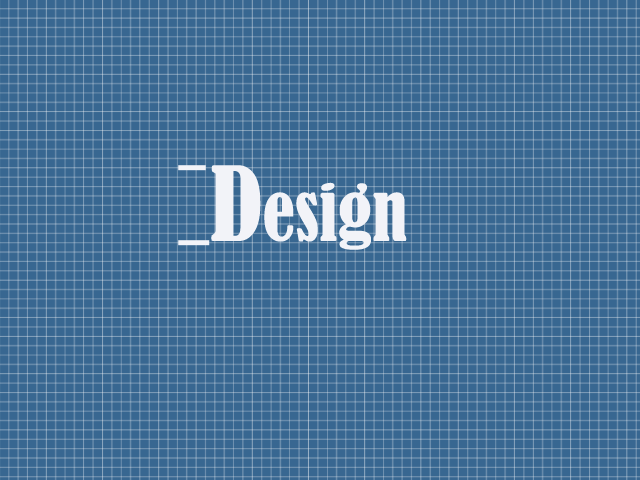
<style>
.page{position:relative;width:640px;height:480px;background:#386791}
.page>*{position:absolute;margin:0}
.t1{font:72px "BernardMT-Condensed";color:#f2f3f8}
.t2{font:96px "BernardMT-Condensed";color:#f2f3f8}
</style>
<div class="page">
<p class="t1" style="left:211px;top:165px;width:196px;height:85px"><span class="t2">D</span>esign</p>
</div>
